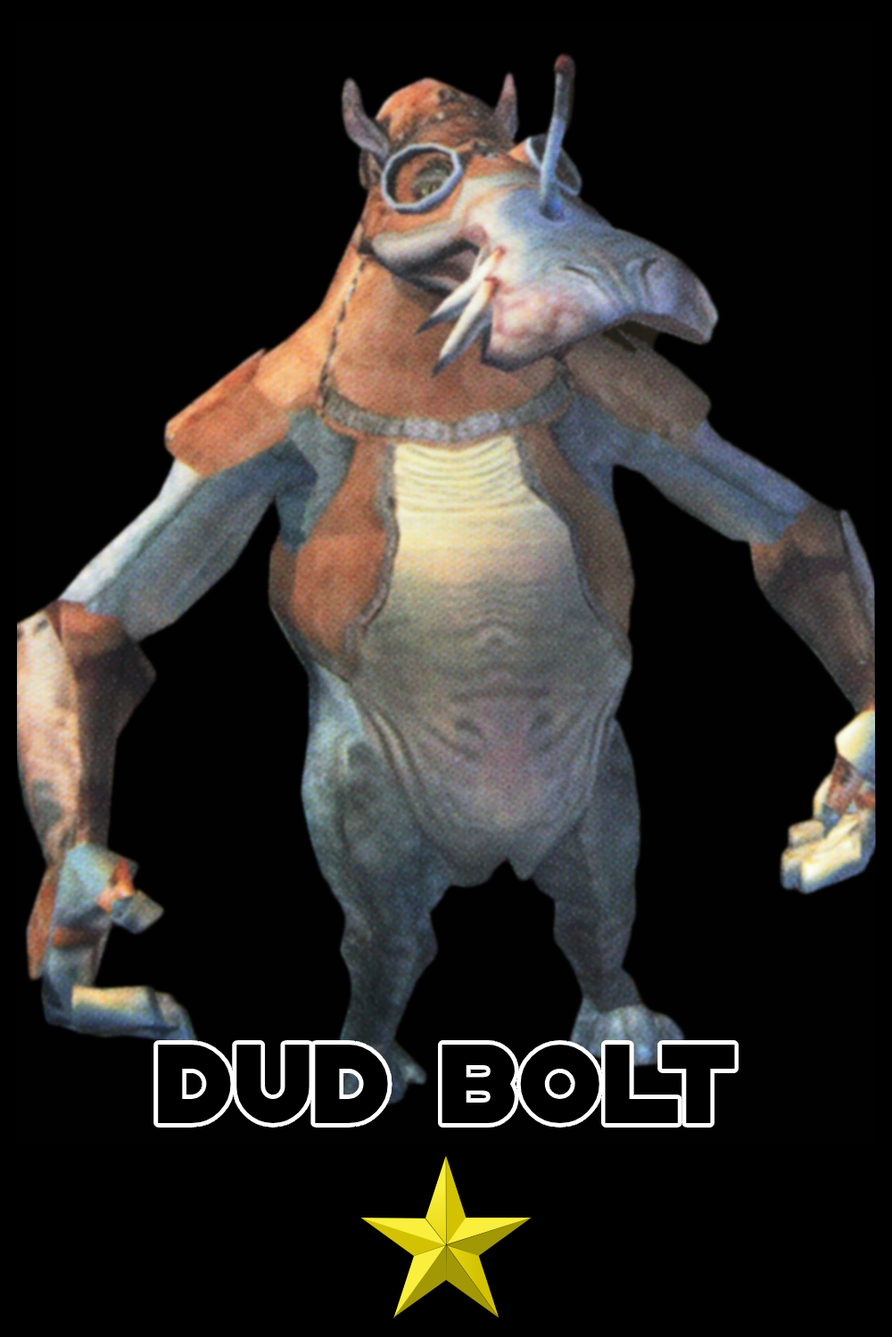
<style>
.page{position:relative;width:892px;height:1337px;background:#010101}
.page>*{position:absolute;margin:0}
.t1{font:120.8px "DistantGalaxy";color:#000000}
</style>
<div class="page">
<p class="t1" style="left:158px;top:1045px;width:577px;height:78px">dud bolt</p>
</div>
